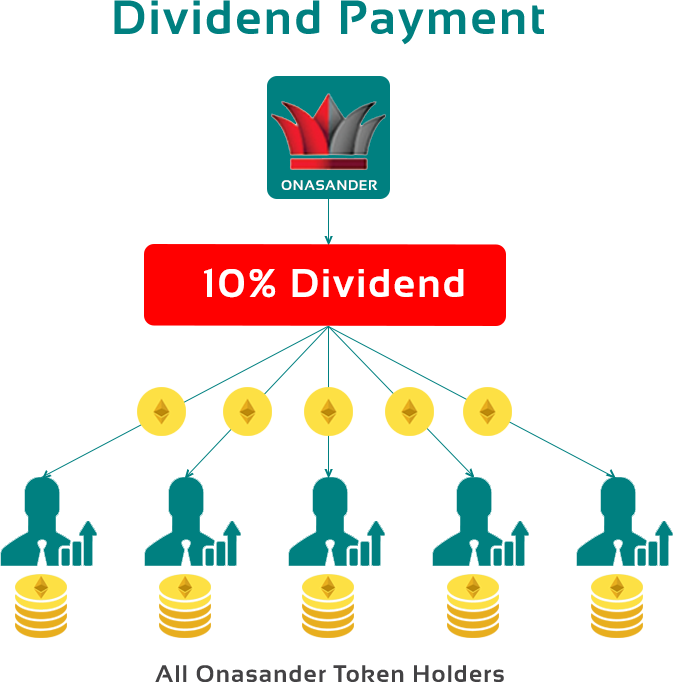
<style>
.page{position:relative;width:673px;height:682px;background:#ffffff}
.page>*{position:absolute;margin:0}
.t1{font:48px "Sansation-Bold";letter-spacing:0.05em;color:#008080}
.t2{font:14px "Sansation-Bold";letter-spacing:0.05em;color:#ffffff}
.t3{font:18px "Sansation-Bold";letter-spacing:0.05em;color:#008080}
.t4{font:40px "Sansation-Bold";letter-spacing:0.05em;color:#ffffff}
.t5{font:24px "Sansation-Bold";letter-spacing:0.05em;color:#434244}
</style>
<div class="page">
<p class="t1" style="left:114px;top:0px;width:430px;height:45px">Dividend Payment</p>
<p class="t2" style="left:281px;top:180px;width:97px;height:10px">ONASANDER</p>
<p class="t3" style="left:324px;top:236px;width:9px;height:8px;rotate:-90deg">&lt;</p>
<p class="t4" style="left:204px;top:268px;width:260px;height:30px">10% Dividend</p>
<p class="t3" style="left:42px;top:470px;width:10px;height:9px;rotate:-42deg">&lt;</p>
<p class="t3" style="left:185px;top:469px;width:9px;height:10px;rotate:-51deg">&lt;</p>
<p class="t3" style="left:324px;top:469px;width:9px;height:8px;rotate:-90deg">&lt;</p>
<p class="t3" style="left:465px;top:468px;width:9px;height:10px;rotate:-132deg">&lt;</p>
<p class="t3" style="left:605px;top:469px;width:10px;height:9px;rotate:-139deg">&lt;</p>
<p class="t5" style="left:155px;top:665px;width:349px;height:17px">All Onasander Token Holders</p>
</div>
